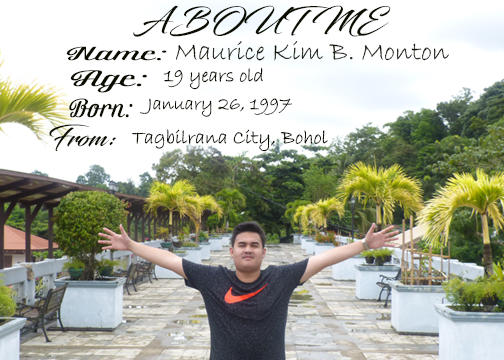
<style>
.page{position:relative;width:504px;height:360px;background:#ffffff}
.page>*{position:absolute;margin:0}
.t1{font:28.9px "Blacksword";color:#0a0d00;scale:1.11 1}
.t2{font:26.9px "BradleyHandITC";color:#0a0d00}
.t3{font:18.3px "Brotherina";color:#0a0d00;scale:1.96 1}
.t4{font:21.4px "Brotherina";color:#0a0d00;scale:1.76 1}
.t5{font:20px "BradleyHandITC";color:#0a0d00}
.t6{font:25.2px "Brotherina";color:#0a0d00}
.t7{font:19.1px "BradleyHandITC";color:#0a0d00}
.t8{font:25.8px "Blacksword";color:#0a0d00;scale:1.03 1}
</style>
<div class="page">
<p class="t1" style="left:133px;top:5px;width:258px;height:32px">ABOUT ME</p>
<p class="t2" style="left:176px;top:41px;width:273px;height:20px">Maurice Kim B. Monton</p>
<p class="t3" style="left:66px;top:46px;width:101px;height:15px">Name:</p>
<p class="t4" style="left:70px;top:70px;width:77px;height:23px">Age:</p>
<p class="t5" style="left:163px;top:67px;width:100px;height:23px">19 years old</p>
<p class="t6" style="left:69px;top:98px;width:64px;height:20px">Born:</p>
<p class="t7" style="left:139px;top:98px;width:154px;height:19px">January 26, 1997</p>
<p class="t8" style="left:49px;top:124px;width:68px;height:27px">From:</p>
<p class="t5" style="left:132px;top:129px;width:196px;height:23px">Tagbilrana City, Bohol</p>
</div>
